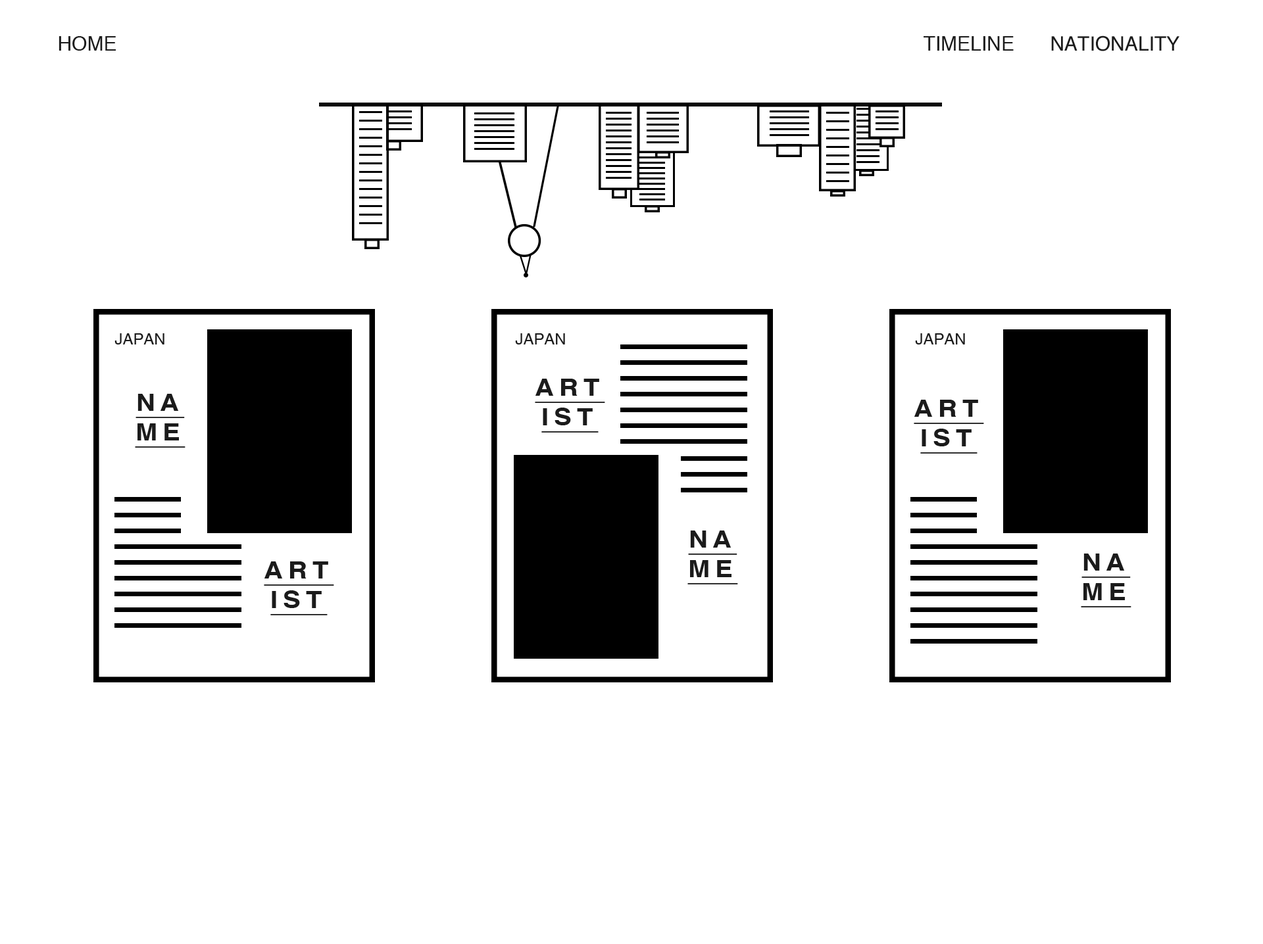
<style>
.page{position:relative;width:1263px;height:944px;background:#ffffff}
.page>*{position:absolute;margin:0}
.t1{font:19.7px "Helvetica";color:#1b1b1b}
.t2{font:15.7px "Helvetica";color:#1b1b1b}
.t3{font:23.7px/29.6px "Helvetica-Bold";letter-spacing:0.2em;color:#1b1b1b;text-decoration:underline;scale:1.11 1}
</style>
<div class="page">
<p class="t1" style="left:59px;top:36px;width:57px;height:15px">HOME</p>
<p class="t1" style="left:923px;top:36px;width:90px;height:15px">TIMELINE</p>
<p class="t1" style="left:1051px;top:36px;width:128px;height:15px">NATIONALITY</p>
<p class="t2" style="left:114px;top:333px;width:50px;height:12px">JAPAN</p>
<p class="t2" style="left:515px;top:333px;width:50px;height:12px">JAPAN</p>
<p class="t2" style="left:915px;top:333px;width:50px;height:12px">JAPAN</p>
<p class="t3" style="left:535px;top:379px;width:70px;height:54px;text-align:justify">ART<br>IST</p>
<p class="t3" style="left:135px;top:394px;width:50px;height:54px;text-align:justify">NA<br>ME</p>
<p class="t3" style="left:913px;top:400px;width:71px;height:54px;text-align:justify">ART<br>IST</p>
<p class="t3" style="left:687px;top:531px;width:51px;height:54px;text-align:justify">NA<br>ME</p>
<p class="t3" style="left:1081px;top:554px;width:50px;height:54px;text-align:justify">NA<br>ME</p>
<p class="t3" style="left:264px;top:562px;width:70px;height:54px;text-align:justify">ART<br>IST</p>
</div>
